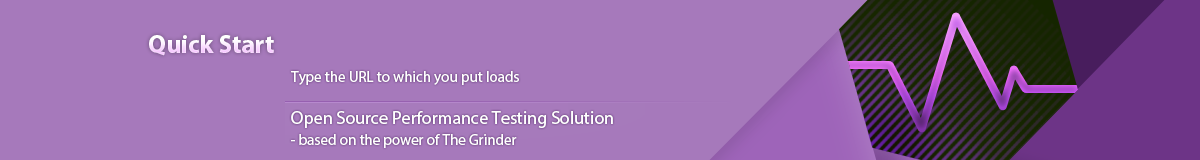
<style>
.page{position:relative;width:1200px;height:160px;background:#a679bb}
.page>*{position:absolute;margin:0}
.t1{font:25.5px "MyriadPro-Bold"}
.t2{font:15px "MyriadPro-Regular";color:#ffffff}
.t3{font:18px/21px "MyriadPro-Regular";color:#ffffff}
.t4{font:15px/21px "MyriadPro-Regular";color:#ffffff}
</style>
<div class="page">
<p class="t1" style="left:149px;top:35px;width:125px;height:21px">Quick Start</p>
<p class="t2" style="left:291px;top:71px;width:228px;height:14px">Type the URL to which you put loads</p>
<p class="t3" style="left:291px;top:111px;width:322px;height:37px">Open Source Performance Testing Solution<br><span class="t4">- based on the power of The Grinder</span></p>
</div>
